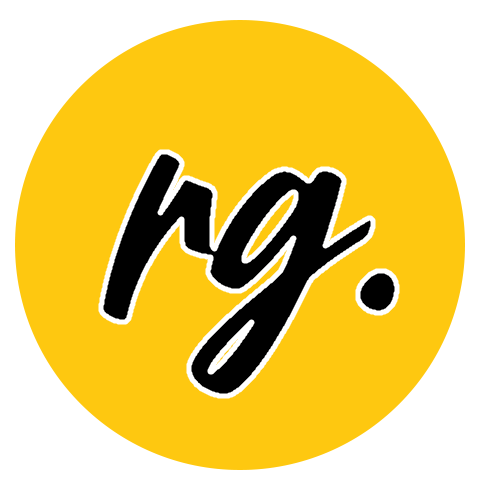
<style>
.page{position:relative;width:479px;height:489px;background:#fec810}
.page>*{position:absolute;margin:0}
.t1{font:350px "BillionDreams";color:#000000}
</style>
<div class="page">
<p class="t1" style="left:101px;top:152px;width:296px;height:244px">rg.</p>
</div>
